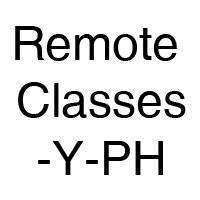
<style>
.page{position:relative;width:200px;height:200px;background:#ffffff}
.page>*{position:absolute;margin:0}
.t1{font:48px "Helvetica";color:#000000}
</style>
<div class="page">
<p class="t1" style="left:15px;top:26px;width:171px;height:149px;text-align:center">Remote <br>Classes<br>-Y-PH</p>
</div>
